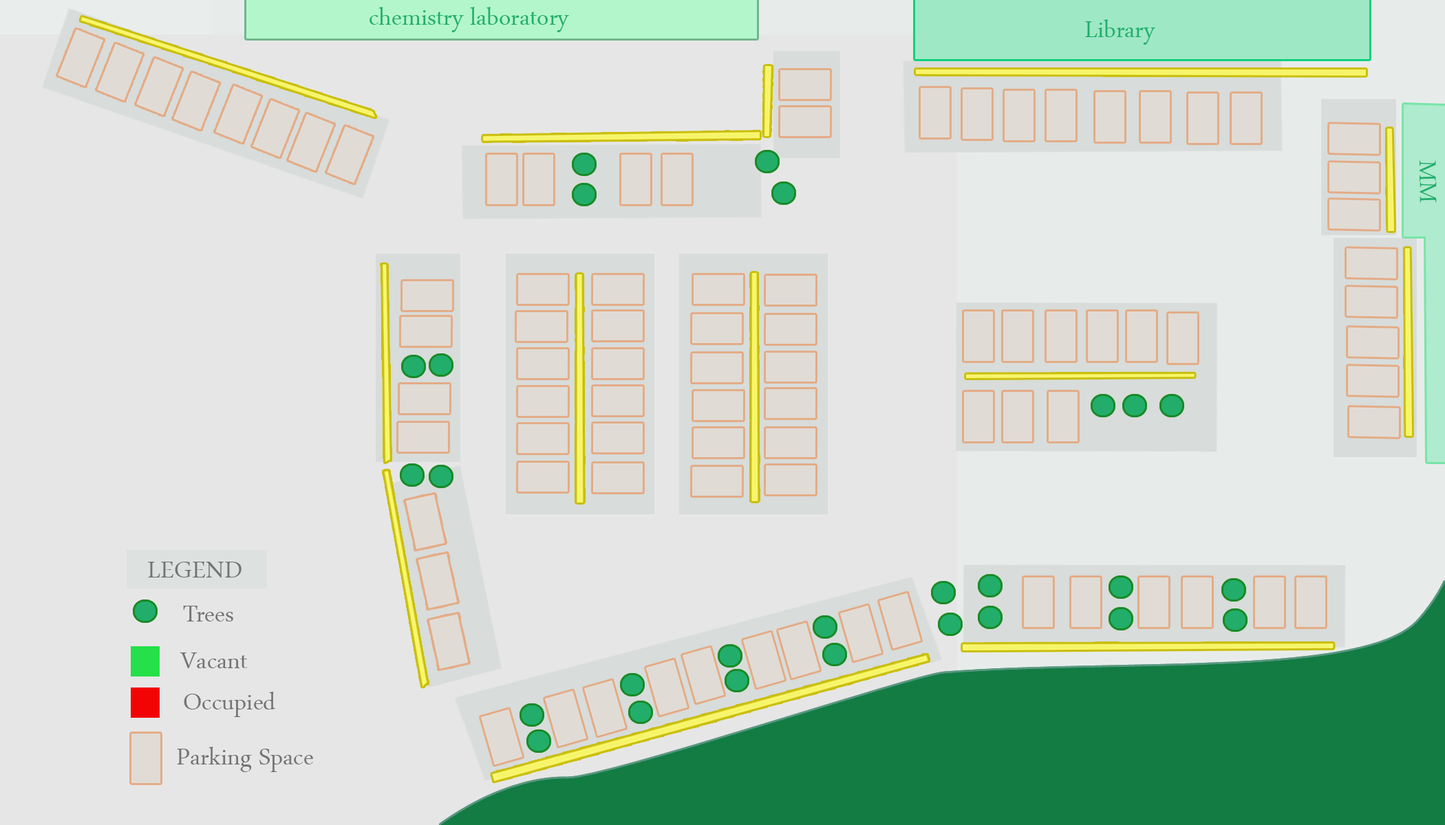
<style>
.page{position:relative;width:1445px;height:825px;background:#e6e6e6}
.page>*{position:absolute;margin:0}
.t1{font:34.4px "ArabicTypesetting";color:#22ae6b}
.t2{font:34.4px "ArabicTypesetting";color:#727473}
</style>
<div class="page">
<p class="t1" style="left:369px;top:7px;width:200px;height:25px">chemistry laboratory</p>
<p class="t1" style="left:1085px;top:19px;width:70px;height:26px">Library</p>
<p class="t1" style="left:1418px;top:160px;width:18px;height:43px;rotate:90deg">MM</p>
<p class="t2" style="left:148px;top:562px;width:93px;height:16px">LEGEND</p>
<p class="t2" style="left:183px;top:606px;width:50px;height:16px">Trees</p>
<p class="t2" style="left:180px;top:653px;width:68px;height:16px">Vacant</p>
<p class="t2" style="left:184px;top:692px;width:91px;height:25px">Occupied</p>
<p class="t2" style="left:177px;top:747px;width:136px;height:25px">Parking Space</p>
</div>
